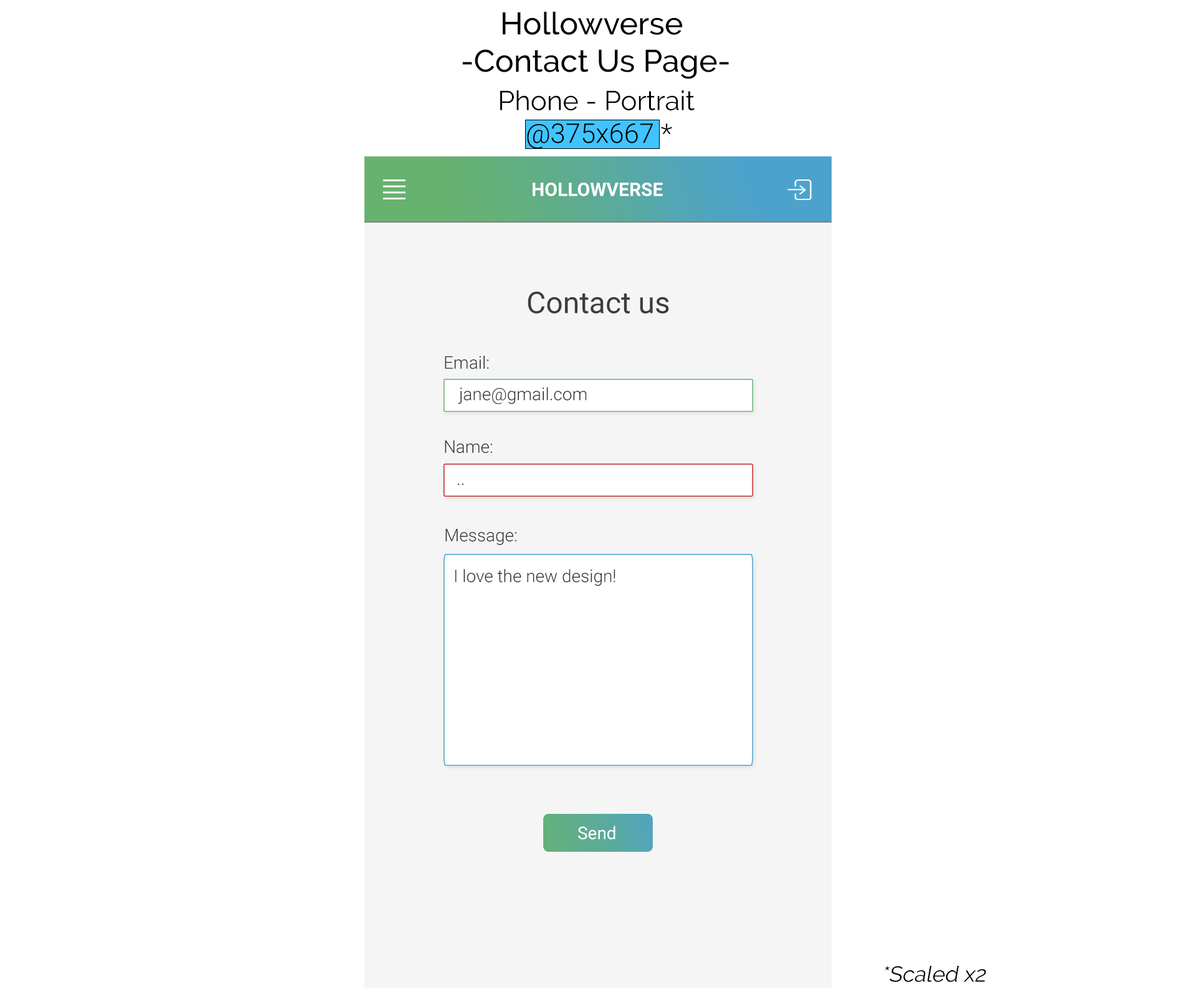
<style>
.page{position:relative;width:1196px;height:997px;background:#ffffff}
.page>*{position:absolute;margin:0}
.t1{font:31.2px "Raleway-Medium";color:#000000}
.t2{font:27.2px "Raleway-Regular";color:#000000}
.t3{font:27.2px "Roboto-Light";color:#000000}
.t4{font:18.7px "Roboto-Bold";color:#ffffff}
.t5{font:29.9px "Roboto-Regular";color:#3d3d3d}
.t6{font:17.4px "Roboto-Light";color:#333333}
.t7{font:17.4px "Roboto-Regular";color:#fefefe}
.t8{font:21.8px "Raleway-Regular";color:#000000;font-style:italic}
</style>
<div class="page">
<p class="t1" style="left:462px;top:11px;width:267px;height:68px">Hollowverse<br>     -Contact Us Page-</p>
<p class="t2" style="left:500px;top:90px;width:195px;height:59px">Phone - Portrait<br>    <span class="t3">@375x667 *</span></p>
<p class="t4" style="left:533px;top:183px;width:130px;height:13px">HOLLOWVERSE</p>
<p class="t5" style="left:528px;top:292px;width:141px;height:21px">Contact us</p>
<p class="t6" style="left:445px;top:355px;width:44px;height:14px">Email:</p>
<p class="t6" style="left:458px;top:387px;width:129px;height:17px">jane@gmail.com</p>
<p class="t6" style="left:445px;top:440px;width:47px;height:13px">Name:</p>
<p class="t6" style="left:458px;top:483px;width:6px;height:2px">..</p>
<p class="t6" style="left:445px;top:528px;width:71px;height:17px">Message:</p>
<p class="t6" style="left:455px;top:569px;width:161px;height:17px">I love the new design!</p>
<p class="t7" style="left:578px;top:826px;width:38px;height:13px">Send</p>
<p class="t8" style="left:885px;top:966px;width:101px;height:16px">*Scaled x2</p>
</div>
